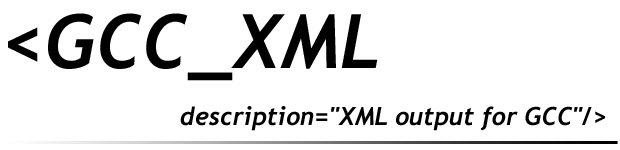
<style>
.page{position:relative;width:620px;height:150px;background:#ffffff}
.page>*{position:absolute;margin:0}
.t1{font:75px "Trebuchet-BoldItalic";color:#000000}
.t2{font:25px "Trebuchet-BoldItalic";color:#000000}
</style>
<div class="page">
<p class="t1" style="left:8px;top:13px;width:370px;height:68px">&lt;GCC_XML</p>
<p class="t2" style="left:180px;top:106px;width:425px;height:25px">description="XML output for GCC"/&gt;</p>
</div>
